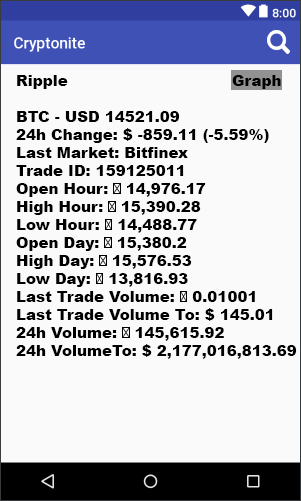
<style>
.page{position:relative;width:301px;height:501px;background:#fafafa}
.page>*{position:absolute;margin:0}
.t1{font:15px "Arial-Black";color:#000000}
.t2{font:15px "MyriadPro-Regular";color:#000000}
</style>
<div class="page">
<p class="t1" style="left:16px;top:75px;width:281px;height:284px">Ripple     Graph<br><br>BTC - USD 14521.09<br>24h Change: $ -859.11 (-5.59%)<br>Last Market: Bitfinex<br>Trade ID: 159125011<br>Open Hour: <span class="t2">Ƀ</span> 14,976.17<br>High Hour: <span class="t2">Ƀ</span> 15,390.28<br>Low Hour: <span class="t2">Ƀ</span> 14,488.77<br>Open Day: <span class="t2">Ƀ</span> 15,380.2<br>High Day: <span class="t2">Ƀ</span> 15,576.53<br>Low Day: <span class="t2">Ƀ</span> 13,816.93<br>Last Trade Volume: <span class="t2">Ƀ</span> 0.01001<br>Last Trade Volume To: $ 145.01<br>24h Volume: <span class="t2">Ƀ</span> 145,615.92<br>24h VolumeTo: $ 2,177,016,813.69</p>
</div>
